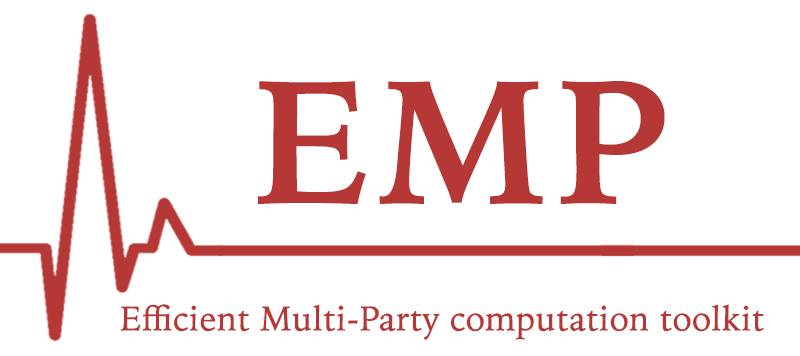
<style>
.page{position:relative;width:800px;height:356px;background:#ffffff}
.page>*{position:absolute;margin:0}
.t1{font:175.9px "IowanOldStyle-Bold";letter-spacing:0.05em;color:#b53837}
.t2{font:34.2px "IowanOldStyle-Roman";letter-spacing:-0.01em;color:#b53837;font-weight:bold}
</style>
<div class="page">
<p class="t1" style="left:257px;top:81px;width:408px;height:123px">EMP</p>
<p class="t2" style="left:120px;top:304px;width:644px;height:36px">Efficient Multi-Party computation toolkit</p>
</div>
